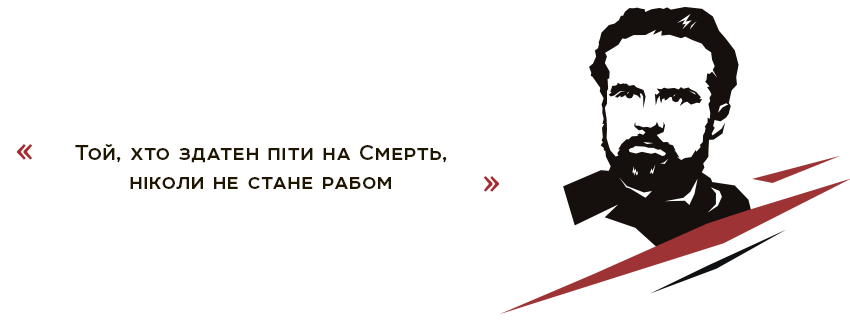
<style>
.page{position:relative;width:850px;height:320px;background:#ffffff}
.page>*{position:absolute;margin:0}
.t1{font:50px "Room";letter-spacing:0.025em;color:#a62b30}
.t2{font:24px "Room-Bold";letter-spacing:0.03em;color:#201600}
.t3{font:49.8px "Room";letter-spacing:0.025em;color:#a62b30}
</style>
<div class="page">
<p class="t1" style="left:17px;top:144px;width:16px;height:16px">«</p>
<p class="t2" style="left:75px;top:143px;width:372px;height:46px;text-align:center">Той, хто здатен піти на Смерть,<br>ніколи не стане рабом</p>
<p class="t3" style="left:483px;top:176px;width:16px;height:16px;rotate:180deg">«</p>
</div>
